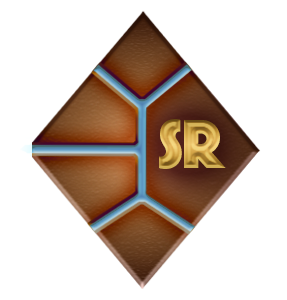
<style>
.page{position:relative;width:287px;height:300px;background:#ffffff}
.page>*{position:absolute;margin:0}
.t1{font:70.1px "MostraNuova-Heavy";letter-spacing:-0.06em}
</style>
<div class="page">
<p class="t1" style="left:159px;top:119px;width:67px;height:50px">SR</p>
</div>
